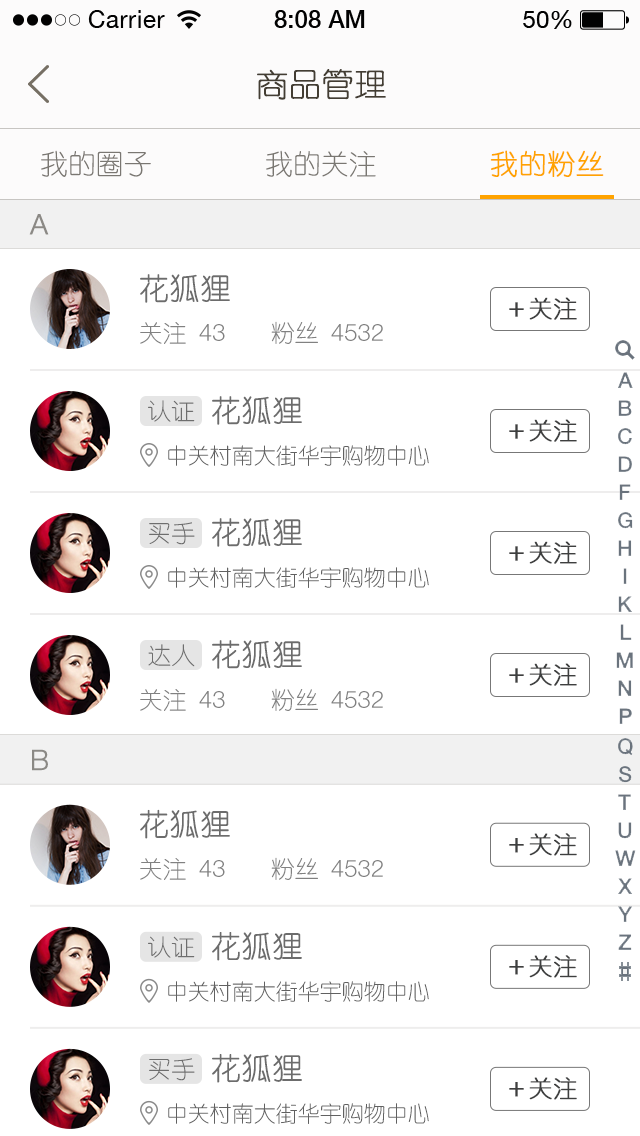
<style>
.page{position:relative;width:640px;height:1136px;background:#ffffff}
.page>*{position:absolute;margin:0}
.t1{font:32px "YouYuan";color:#433d33;text-transform:uppercase;font-weight:bold}
.t2{font:28px "YouYuan";color:#7a7772;text-transform:uppercase}
.t3{font:28px "YouYuan";color:#ffa300;text-transform:uppercase;font-weight:bold}
.t4{font:28px "HelveticaNeueLTPro-Lt";color:#8b8985;text-transform:uppercase;font-weight:bold}
.t5{font:30px "YouYuan";color:#555555;text-transform:uppercase;font-weight:bold}
.t6{font:24px "YouYuan";color:#3e3f3f;font-weight:bold}
.t7{font:24px "YouYuan";color:#818181;text-transform:uppercase}
.t8{font:24px "HelveticaNeueLTPro-Lt";color:#818181;text-transform:uppercase}
.t9{font:24px "YouYuan";color:#6e6e6e;text-transform:uppercase}
.t10{font:22px "YouYuan";color:#616161;text-transform:uppercase}
</style>
<div class="page">
<p class="t1" style="left:257px;top:69px;width:129px;height:31px">商品管理</p>
<p class="t2" style="left:41px;top:150px;width:110px;height:27px">我的圈子</p>
<p class="t2" style="left:266px;top:150px;width:110px;height:27px">我的关注</p>
<p class="t3" style="left:490px;top:150px;width:114px;height:28px">我的粉丝</p>
<p class="t4" style="left:29px;top:214px;width:20px;height:21px">A</p>
<p class="t5" style="left:140px;top:274px;width:90px;height:29px;opacity:0.9">花狐狸</p>
<p class="t6" style="left:509px;top:297px;width:68px;height:23px">＋关注</p>
<p class="t7" style="left:140px;top:322px;width:85px;height:22px">关注 <span class="t8">43</span></p>
<p class="t8" style="left:271px;top:321px;width:112px;height:23px"><span class="t7">粉丝 </span>4532</p>
<p class="t9" style="left:148px;top:400px;width:47px;height:22px">认证</p>
<p class="t5" style="left:212px;top:396px;width:90px;height:29px;opacity:0.9">花狐狸</p>
<p class="t6" style="left:509px;top:419px;width:68px;height:23px">＋关注</p>
<p class="t10" style="left:168px;top:445px;width:261px;height:21px">中关村南大街华宇购物中心</p>
<p class="t5" style="left:212px;top:518px;width:90px;height:29px;opacity:0.9">花狐狸</p>
<p class="t9" style="left:149px;top:522px;width:46px;height:23px">买手</p>
<p class="t6" style="left:509px;top:541px;width:68px;height:23px">＋关注</p>
<p class="t10" style="left:168px;top:567px;width:261px;height:21px">中关村南大街华宇购物中心</p>
<p class="t5" style="left:212px;top:640px;width:90px;height:29px;opacity:0.9">花狐狸</p>
<p class="t9" style="left:148px;top:644px;width:47px;height:23px">达人</p>
<p class="t6" style="left:509px;top:663px;width:68px;height:23px">＋关注</p>
<p class="t7" style="left:140px;top:689px;width:85px;height:22px">关注 <span class="t8">43</span></p>
<p class="t8" style="left:271px;top:688px;width:112px;height:23px"><span class="t7">粉丝 </span>4532</p>
<p class="t4" style="left:32px;top:749px;width:16px;height:22px">b</p>
<p class="t5" style="left:140px;top:809px;width:90px;height:30px;opacity:0.9">花狐狸</p>
<p class="t6" style="left:509px;top:833px;width:68px;height:23px">＋关注</p>
<p class="t8" style="left:271px;top:857px;width:112px;height:23px"><span class="t7">粉丝 </span>4532</p>
<p class="t7" style="left:140px;top:858px;width:85px;height:22px">关注 <span class="t8">43</span></p>
<p class="t9" style="left:148px;top:936px;width:47px;height:22px">认证</p>
<p class="t5" style="left:212px;top:932px;width:90px;height:29px;opacity:0.9">花狐狸</p>
<p class="t6" style="left:509px;top:955px;width:68px;height:23px">＋关注</p>
<p class="t10" style="left:168px;top:981px;width:261px;height:21px">中关村南大街华宇购物中心</p>
<p class="t9" style="left:149px;top:1058px;width:46px;height:23px">买手</p>
<p class="t5" style="left:212px;top:1054px;width:90px;height:29px;opacity:0.9">花狐狸</p>
<p class="t6" style="left:509px;top:1077px;width:68px;height:23px">＋关注</p>
<p class="t10" style="left:168px;top:1103px;width:261px;height:21px">中关村南大街华宇购物中心</p>
</div>
